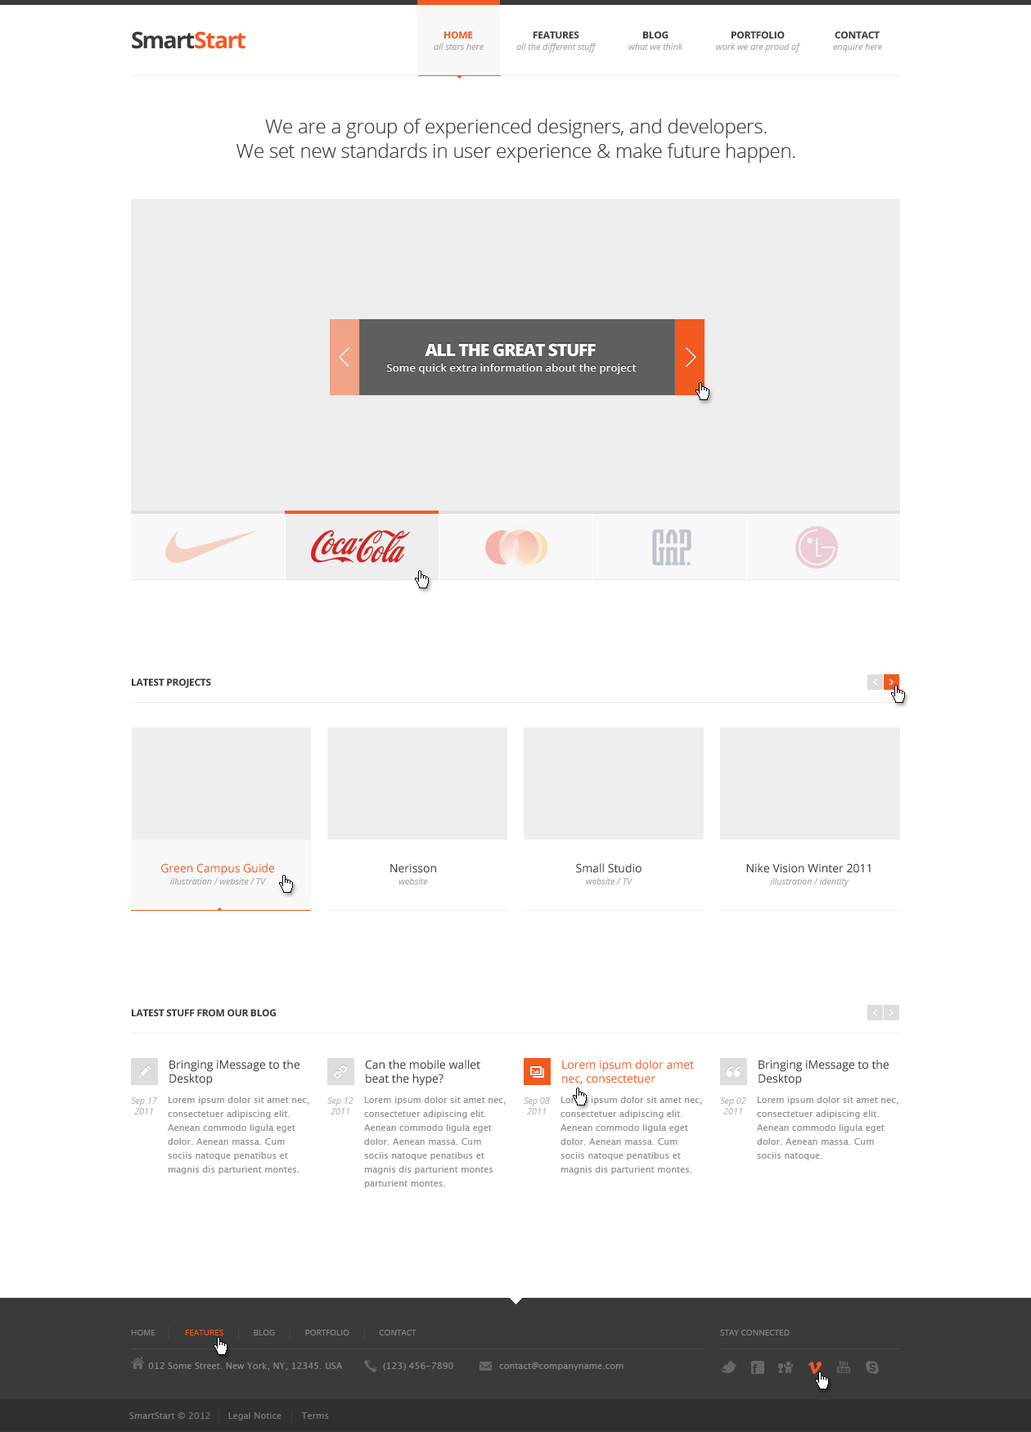
<style>
.page{position:relative;width:1031px;height:1432px;background:#ffffff}
.page>*{position:absolute;margin:0}
.t1{font:22.9px "OpenSans-Bold";letter-spacing:-0.05em;color:#f15a23}
.t2{font:22.9px "OpenSans-Bold";letter-spacing:-0.075em;color:#3a3a3a}
.t3{font:22.9px "OpenSans-Bold";letter-spacing:-0.05em;color:#3a3a3a}
.t4{font:9.8px "OpenSans-Bold";letter-spacing:-0.025em;color:#f15a23;text-transform:uppercase}
.t5{font:9.8px "OpenSans-Bold";letter-spacing:-0.025em;color:#3a3a3a;text-transform:uppercase}
.t6{font:9px "OpenSans-Italic";letter-spacing:-0.01em;color:#aeaeae}
.t7{font:19.6px/24.5px "OpenSans-Light";letter-spacing:-0.01em;color:#2a2a2a}
.t8{font:29.5px/24.5px "OpenSans";letter-spacing:-0.025em;color:#2a2a2a}
.t9{font:17.2px "OpenSans-Extrabold";letter-spacing:-0.05em;color:#ffffff;text-transform:uppercase}
.t10{font:10.6px "OpenSans-Semibold";letter-spacing:0.01em;color:#ffffff}
.t11{font:11.5px "OpenSans";color:#f35a20}
.t12{font:11.5px "OpenSans";color:#3a3a3a}
.t13{font:11.5px/13.9px "OpenSans";color:#3a3a3a}
.t14{font:11.5px/13.9px "OpenSans";color:#f35a20}
.t15{font:9px/10.6px "OpenSans-Italic";letter-spacing:-0.01em;color:#bbbbbb}
.t16{font:9px/13.9px "LucidaSans";color:#959393}
.t17{font:8.2px "OpenSans";color:#868686;text-transform:uppercase}
.t18{font:8.2px "OpenSans";color:#f15a23;text-transform:uppercase}
.t19{font:9px "LucidaSans";color:#868686}
</style>
<div class="page">
<p class="t1" style="left:132px;top:31px;width:113px;height:18px"><span class="t2">S</span><span class="t3">mart</span>Start</p>
<p class="t4" style="left:444px;top:31px;width:29px;height:7px">Home</p>
<p class="t5" style="left:533px;top:31px;width:46px;height:7px">Features</p>
<p class="t5" style="left:643px;top:31px;width:25px;height:7px">Blog</p>
<p class="t5" style="left:731px;top:31px;width:54px;height:7px">Portfolio</p>
<p class="t5" style="left:835px;top:31px;width:45px;height:7px">Contact</p>
<p class="t6" style="left:434px;top:43px;width:50px;height:7px">all stars here</p>
<p class="t6" style="left:516px;top:43px;width:80px;height:9px">all the different stuff</p>
<p class="t6" style="left:628px;top:43px;width:55px;height:7px">what we think</p>
<p class="t6" style="left:716px;top:43px;width:85px;height:9px">work we are proud of</p>
<p class="t6" style="left:833px;top:43px;width:49px;height:9px">enquire here</p>
<p class="t7" style="left:236px;top:119px;width:559px;height:44px;text-align:center;opacity:0.9">We are a group of experienced designers, and developers.<br>We set new standards in user experience &amp; make future happen.<br><br><span class="t8"><br>We set new standards in user experience &amp; make future happen.</span></p>
<p class="t9" style="left:425px;top:343px;width:171px;height:14px">All The Great Stuff</p>
<p class="t10" style="left:387px;top:363px;width:250px;height:11px">Some quick extra information about the project</p>
<p class="t5" style="left:132px;top:678px;width:79px;height:10px">Latest Projects</p>
<p class="t11" style="left:161px;top:863px;width:113px;height:12px">Green Campus Guide</p>
<p class="t12" style="left:390px;top:863px;width:46px;height:10px">Nerisson</p>
<p class="t12" style="left:576px;top:863px;width:65px;height:10px">Small Studio</p>
<p class="t12" style="left:746px;top:863px;width:125px;height:10px">Nike Vision Winter 2011</p>
<p class="t6" style="left:170px;top:878px;width:97px;height:6px">illustration / website / TV</p>
<p class="t6" style="left:398px;top:878px;width:30px;height:6px">website</p>
<p class="t6" style="left:586px;top:878px;width:46px;height:6px">website / TV</p>
<p class="t6" style="left:770px;top:878px;width:79px;height:9px">illustration / identity</p>
<p class="t5" style="left:132px;top:1009px;width:144px;height:7px">Latest stuff from our blog</p>
<p class="t13" style="left:169px;top:1060px;width:130px;height:26px">Bringing iMessage to the <br>Desktop</p>
<p class="t13" style="left:365px;top:1060px;width:115px;height:26px">Can the mobile wallet <br>beat the hype?</p>
<p class="t14" style="left:562px;top:1060px;width:132px;height:24px">Lorem ipsum dolor amet <br>nec, consectetuer</p>
<p class="t13" style="left:758px;top:1060px;width:131px;height:26px">Bringing iMessage to the <br>Desktop</p>
<p class="t15" style="left:131px;top:1097px;width:26px;height:17px;text-align:center">Sep 17<br>2011</p>
<p class="t16" style="left:168px;top:1096px;width:141px;height:78px">Lorem ipsum dolor sit amet nec, consectetuer adipiscing elit. Aenean commodo ligula eget dolor. Aenean massa. Cum sociis natoque penatibus et magnis dis parturient montes.</p>
<p class="t15" style="left:327px;top:1097px;width:26px;height:17px;text-align:center">Sep 12<br>2011</p>
<p class="t16" style="left:364px;top:1096px;width:142px;height:92px">Lorem ipsum dolor sit amet nec, consectetuer adipiscing elit. Aenean commodo ligula eget dolor. Aenean massa. Cum sociis natoque penatibus et magnis dis parturient montes parturient montes.</p>
<p class="t15" style="left:524px;top:1097px;width:26px;height:17px;text-align:center">Sep 08<br>2011</p>
<p class="t16" style="left:560px;top:1096px;width:142px;height:78px">Lorem ipsum dolor sit amet nec, consectetuer adipiscing elit. Aenean commodo ligula eget dolor. Aenean massa. Cum sociis natoque penatibus et magnis dis parturient montes.</p>
<p class="t15" style="left:720px;top:1097px;width:26px;height:17px;text-align:center">Sep 02<br>2011</p>
<p class="t16" style="left:757px;top:1096px;width:141px;height:64px">Lorem ipsum dolor sit amet nec, consectetuer adipiscing elit. Aenean commodo ligula eget dolor. Aenean massa. Cum sociis natoque.</p>
<p class="t17" style="left:131px;top:1330px;width:285px;height:5px">Home              <span class="t18">Features</span>              Blog              Portfolio              Contact</p>
<p class="t17" style="left:720px;top:1330px;width:70px;height:5px">Stay connected</p>
<p class="t19" style="left:148px;top:1362px;width:195px;height:8px">012 Some Street. New York, NY, 12345. USA</p>
<p class="t19" style="left:383px;top:1362px;width:70px;height:8px">(123) 456-7890</p>
<p class="t19" style="left:499px;top:1362px;width:124px;height:8px">contact@companyname.com</p>
<p class="t19" style="left:129px;top:1412px;width:200px;height:8px;opacity:0.85">SmartStart © 2012      Legal Notice       Terms</p>
</div>
